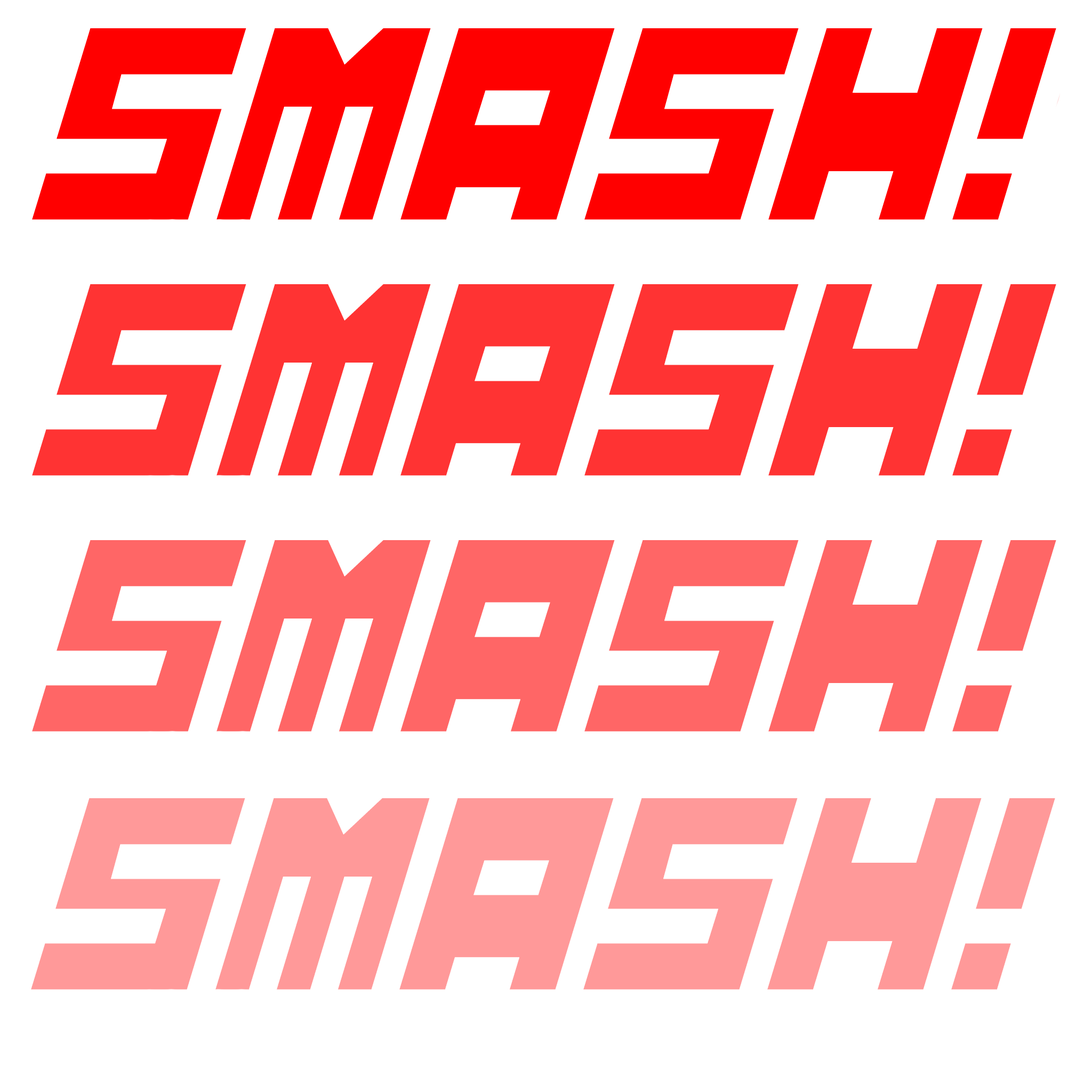
<style>
.page{position:relative;width:1092px;height:1092px;background:#ffffff}
.page>*{position:absolute;margin:0}
.t1{font:258.1px "FullPack2025";letter-spacing:-0.04em;color:#ffffff;scale:0.76 1}
</style>
<div class="page">
<p class="t1" style="left:0px;top:0px;width:1089px;height:248px">SMASH!</p>
<p class="t1" style="left:0px;top:255px;width:1089px;height:249px">SMASH!</p>
<p class="t1" style="left:0px;top:511px;width:1089px;height:249px">SMASH!</p>
</div>
